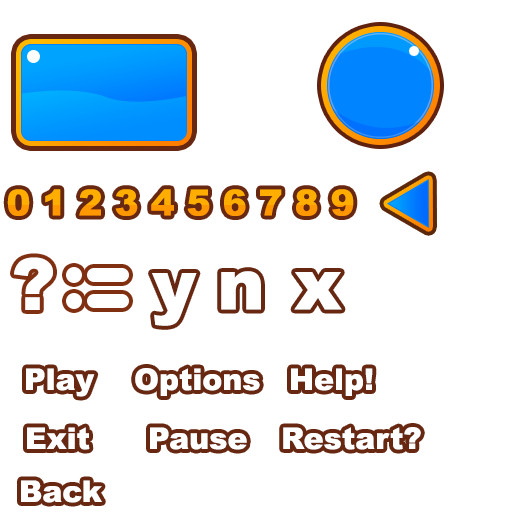
<style>
.page{position:relative;width:512px;height:512px;background:#ffffff}
.page>*{position:absolute;margin:0}
.t1{font:36px "Arial-Black"}
.t2{font:72px "Arial-Black";color:#ffffff}
.t3{font:30px "Arial-Black";color:#ffffff}
</style>
<div class="page">
<p class="t1" style="left:7px;top:189px;width:347px;height:27px">0 1 2 3 4 5 6 7 8 9</p>
<p class="t1" style="left:7px;top:189px;width:347px;height:27px">0 1 2 3 4 5 6 7 8 9</p>
<p class="t2" style="left:14px;top:257px;width:39px;height:53px">?</p>
<p class="t2" style="left:14px;top:257px;width:39px;height:53px">?</p>
<p class="t2" style="left:152px;top:273px;width:45px;height:53px">y</p>
<p class="t2" style="left:221px;top:271px;width:40px;height:39px">n</p>
<p class="t2" style="left:294px;top:272px;width:48px;height:38px">x</p>
<p class="t3" style="left:26px;top:368px;width:69px;height:29px">Play</p>
<p class="t3" style="left:135px;top:368px;width:125px;height:28px">Options</p>
<p class="t3" style="left:291px;top:368px;width:82px;height:28px">Help!</p>
<p class="t3" style="left:27px;top:427px;width:63px;height:23px">Exit</p>
<p class="t3" style="left:150px;top:427px;width:97px;height:23px">Pause</p>
<p class="t3" style="left:283px;top:427px;width:138px;height:23px">Restart?</p>
<p class="t3" style="left:21px;top:480px;width:81px;height:23px">Back</p>
</div>
